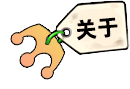
<style>
.page{position:relative;width:130px;height:89px;background:#ffffff}
.page>*{position:absolute;margin:0}
.t1{font:22.2px "AlibabaPuHuiTiB";color:#000000}
</style>
<div class="page">
<p class="t1" style="left:77px;top:17px;width:41px;height:24px;rotate:-5deg">关于</p>
</div>
